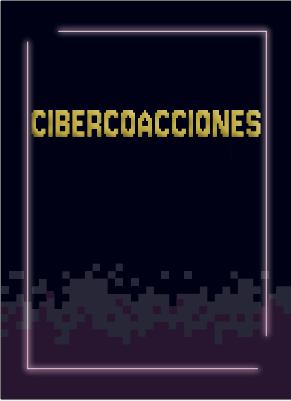
<style>
.page{position:relative;width:291px;height:401px;background:#000115}
.page>*{position:absolute;margin:0}
.t1{font:50px "Jersey10-Regular";letter-spacing:0.025em;scale:0.73 1}
</style>
<div class="page">
<p class="t1" style="left:31px;top:109px;width:230px;height:28px">CIBERCOACCIONES</p>
</div>
